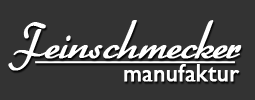
<style>
.page{position:relative;width:255px;height:100px;background:#333333}
.page>*{position:absolute;margin:0}
.t1{font:36px "BetterHeather";color:#ffffff;font-weight:bold}
.t2{font:24px "GillSans";color:#ffffff;font-weight:bold}
</style>
<div class="page">
<p class="t1" style="left:8px;top:20px;width:234px;height:51px">Feinschmecker</p>
<p class="t2" style="left:124px;top:64px;width:116px;height:18px">manufaktur</p>
</div>
